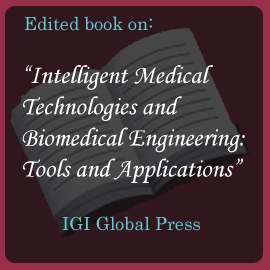
<style>
.page{position:relative;width:270px;height:270px;background:#30171d}
.page>*{position:absolute;margin:0}
.t1{font:18px "Century";color:#6cc9d4}
.t2{font:26px "MonotypeCorsiva";color:#ffffff}
</style>
<div class="page">
<p class="t1" style="left:24px;top:16px;width:128px;height:15px">Edited book on:</p>
<p class="t2" style="left:22px;top:65px;width:223px;height:118px">“Intelligent Medical<br>Technologies and <br>Biomedical Engineering:<br>Tools and Applications”</p>
<p class="t1" style="left:62px;top:216px;width:138px;height:15px">IGI Global Press</p>
</div>
